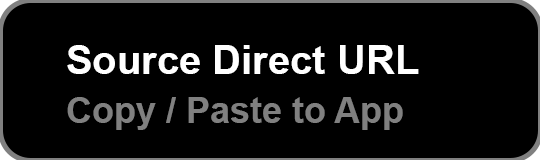
<style>
.page{position:relative;width:540px;height:160px;background:#000000}
.page>*{position:absolute;margin:0}
.t1{font:40px "Arial-BoldMT";color:#ffffff}
.t2{font:36px "Arial-BoldMT";color:#808080}
</style>
<div class="page">
<p class="t1" style="left:67px;top:45px;width:352px;height:29px">Source Direct URL</p>
<p class="t2" style="left:67px;top:97px;width:336px;height:33px">Copy / Paste to App</p>
</div>
